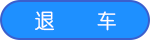
<style>
.page{position:relative;width:150px;height:40px;background:#1e90ff}
.page>*{position:absolute;margin:0}
.t1{font:20px "YouYuan";color:#ffffff;font-weight:bold}
</style>
<div class="page">
<p class="t1" style="left:35px;top:11px;width:81px;height:20px">退    车</p>
</div>
